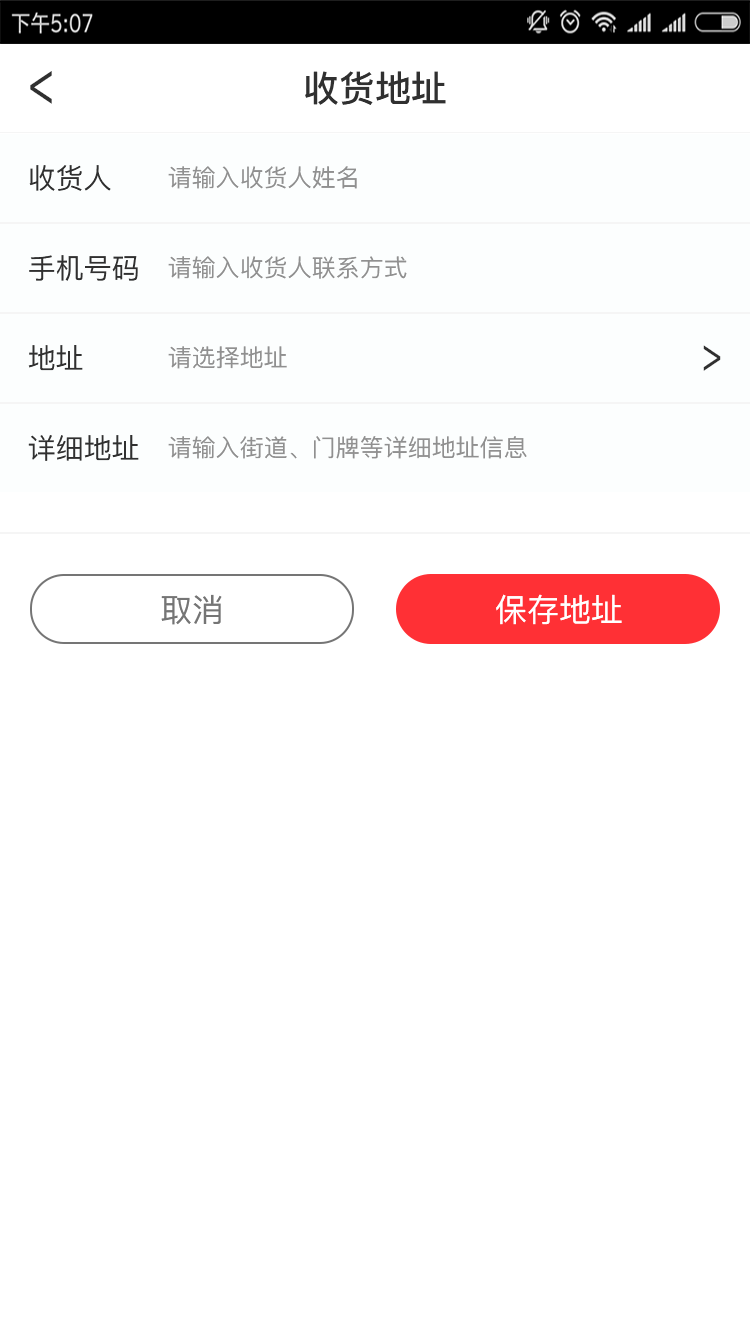
<style>
.page{position:relative;width:750px;height:1334px;background:#ffffff}
.page>*{position:absolute;margin:0}
.t1{font:64.6px "PingFang-SC-Medium";color:#303030;scale:0.66 1}
.t2{font:36px "PingFang-SC-Bold";color:#303030}
.t3{font:28px "PingFang-SC-Medium";color:#303030}
.t4{font:24px "PingFang-SC-Medium";color:#909090}
.t5{font:50px "PingFang-SC-Medium";color:#303030;scale:0.66 1}
.t6{font:32px "PingFang-SC-Medium";color:#757575}
.t7{font:32px "PingFang-SC-Medium";color:#ffffff}
</style>
<div class="page">
<p class="t1" style="left:30px;top:71px;width:22px;height:33px;rotate:180deg">&gt;</p>
<p class="t2" style="left:305px;top:71px;width:141px;height:34px">收货地址</p>
<p class="t3" style="left:29px;top:165px;width:82px;height:26px">收货人</p>
<p class="t4" style="left:168px;top:166px;width:189px;height:23px">请输入收货人姓名</p>
<p class="t3" style="left:29px;top:255px;width:109px;height:26px">手机号码</p>
<p class="t4" style="left:168px;top:256px;width:239px;height:23px">请输入收货人联系方式</p>
<p class="t3" style="left:28px;top:345px;width:55px;height:26px">地址</p>
<p class="t4" style="left:168px;top:346px;width:119px;height:23px">请选择地址</p>
<p class="t5" style="left:703px;top:345px;width:18px;height:26px">&gt;</p>
<p class="t3" style="left:28px;top:435px;width:111px;height:26px">详细地址</p>
<p class="t4" style="left:168px;top:436px;width:359px;height:23px">请输入街道、门牌等详细地址信息</p>
<p class="t6" style="left:161px;top:594px;width:61px;height:31px">取消</p>
<p class="t7" style="left:496px;top:594px;width:126px;height:31px">保存地址</p>
</div>
